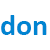
<style>
.page{position:relative;width:50px;height:50px;background:#ffffff}
.page>*{position:absolute;margin:0}
.t1{font:30px "Calibri-Bold";color:#0084d1}
</style>
<div class="page">
<p class="t1" style="left:1px;top:15px;width:46px;height:20px">don</p>
</div>
